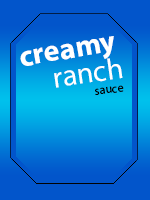
<style>
.page{position:relative;width:150px;height:200px;background:#0255cb}
.page>*{position:absolute;margin:0}
.t1{font:30px "MyriadPro-Bold";color:#ffffff}
.t2{font:30px "MyriadPro-Regular";color:#ffffff}
.t3{font:12px "MyriadPro-Regular";color:#000000}
</style>
<div class="page">
<p class="t1" style="left:20px;top:36px;width:94px;height:30px;rotate:-10deg">creamy</p>
<p class="t2" style="left:54px;top:58px;width:69px;height:30px;rotate:-8deg">ranch</p>
<p class="t3" style="left:95px;top:85px;width:29px;height:10px;rotate:-7deg">sauce</p>
</div>
